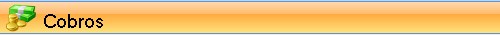
<style>
.page{position:relative;width:500px;height:35px}
.page>*{position:absolute;margin:0}
.t1{font:18px "MS Sans Serif";color:#000000}
</style>
<div class="page">
<p class="t1" style="left:44px;top:14px;width:59px;height:14px">Cobros</p>
</div>
